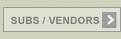
<style>
.page{position:relative;width:121px;height:39px;background:#d1d2be}
.page>*{position:absolute;margin:0}
.t1{font:10px "Arial-BoldMT";letter-spacing:0.025em;color:#7c7c7c}
</style>
<div class="page">
<p class="t1" style="left:11px;top:16px;width:89px;height:8px">SUBS / VENDORS</p>
</div>
